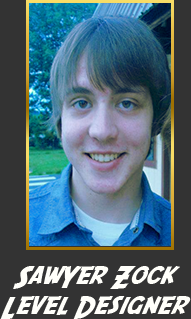
<style>
.page{position:relative;width:191px;height:319px;background:#333333}
.page>*{position:absolute;margin:0}
.t1{font:24.6px "SFFedora";letter-spacing:-0.005em;color:#fffffa;scale:1.05 1}
</style>
<div class="page">
<p class="t1" style="left:0px;top:266px;width:191px;height:53px;text-align:center">SawYer Zock<br>Level Designer</p>
</div>
